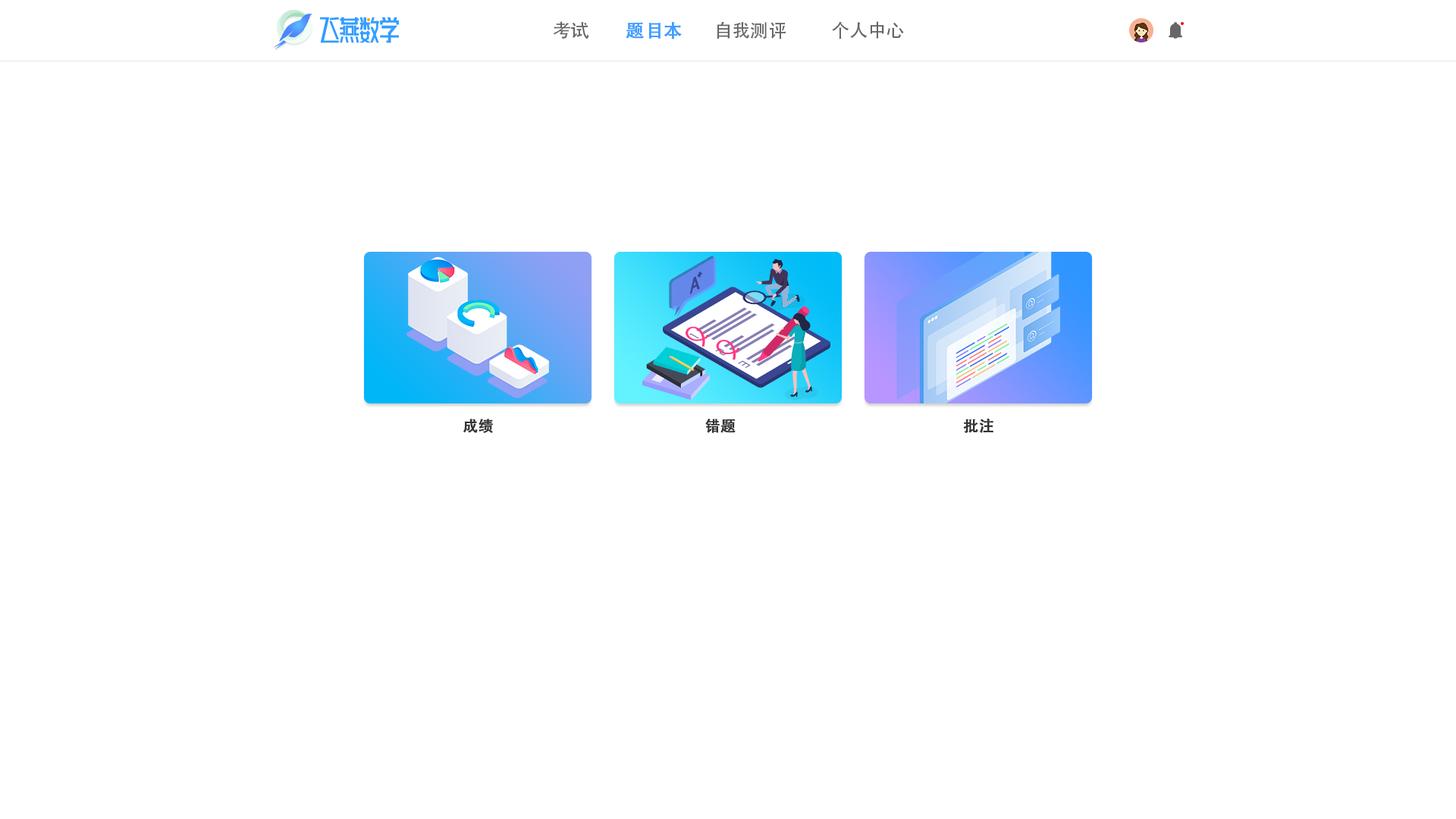
<style>
.page{position:relative;width:1456px;height:819px;background:#ffffff}
.page>*{position:absolute;margin:0}
.t1{font:18.2px "AdobeHeitiStd-Regular";color:#666666}
.t2{font:18.2px "AdobeHeitiStd-Regular";color:#409eff;font-weight:bold}
.t3{font:15.2px "AdobeHeitiStd-Regular";color:#333333;font-weight:bold}
</style>
<div class="page">
<p class="t1" style="left:553px;top:21px;width:36px;height:18px">考试</p>
<p class="t2" style="left:626px;top:22px;width:56px;height:17px">题目本</p>
<p class="t1" style="left:717px;top:21px;width:69px;height:18px">自我测评</p>
<p class="t1" style="left:832px;top:21px;width:72px;height:18px">个人中心</p>
<p class="t3" style="left:463px;top:419px;width:30px;height:14px">成绩</p>
<p class="t3" style="left:705px;top:419px;width:31px;height:14px">错题</p>
<p class="t3" style="left:963px;top:418px;width:30px;height:15px">批注</p>
</div>
